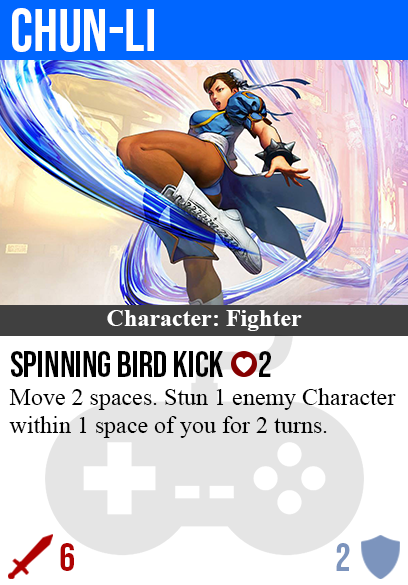
<style>
.page{position:relative;width:408px;height:585px;background:#ffffff}
.page>*{position:absolute;margin:0}
.t1{font:60px "BebasNeue-Regular";color:#ffffff}
.t2{font:24px "TimesNewRomanPS-BoldMT";color:#ffffff}
.t3{font:36px "BebasNeue-Regular";color:#000000}
.t4{font:24px "TimesNewRomanPSMT";color:#000000}
.t5{font:40px "BebasNeue-Regular";color:#af0202}
.t6{font:40px "BebasNeue-Regular";color:#7c94bd}
</style>
<div class="page">
<p class="t1" style="left:12px;top:8px;width:142px;height:44px">chun-li</p>
<p class="t2" style="left:107px;top:310px;width:195px;height:21px">Character: Fighter</p>
<p class="t3" style="left:11px;top:351px;width:260px;height:26px">spinning bird kick      2</p>
<p class="t4" style="left:9px;top:388px;width:387px;height:50px">Move 2 spaces. Stun 1 enemy Character<br>within 1 space of you for 2 turns.</p>
<p class="t5" style="left:60px;top:543px;width:14px;height:28px">6</p>
<p class="t6" style="left:336px;top:543px;width:14px;height:28px">2</p>
</div>
